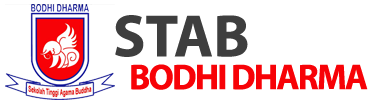
<style>
.page{position:relative;width:372px;height:100px;background:#ffffff}
.page>*{position:absolute;margin:0}
.t1{font:60px "MyriadPro-Bold";color:#3e3e3e}
.t2{font:36px "MyriadPro-Bold";letter-spacing:-0.05em;color:#f70207}
</style>
<div class="page">
<p class="t1" style="left:115px;top:15px;width:133px;height:42px">STAB</p>
<p class="t2" style="left:131px;top:64px;width:237px;height:26px">BODHI DHARMA</p>
</div>
